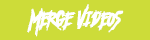
<style>
.page{position:relative;width:150px;height:40px;background:#cddc39}
.page>*{position:absolute;margin:0}
.t1{font:31.2px "AnotherAmerica";letter-spacing:0.025em;color:#ffffff;font-weight:bold;scale:0.81 1}
</style>
<div class="page">
<p class="t1" style="left:27px;top:4px;width:97px;height:33px">Merge Videos</p>
</div>
